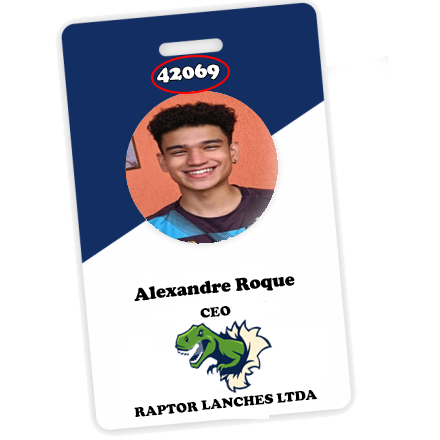
<style>
.page{position:relative;width:440px;height:440px;background:#ffffff}
.page>*{position:absolute;margin:0}
.t1{font:21px "CooperBlack";color:#ffffff}
.t2{font:14px "CooperBlack";color:#000000}
</style>
<div class="page">
<p class="t1" style="left:157px;top:64px;width:63px;height:19px;rotate:-5deg">42069</p>
<p class="t2" style="left:200px;top:306px;width:31px;height:12px;rotate:-5deg">CEO</p>
<p class="t2" style="left:134px;top:390px;width:184px;height:27px;rotate:-6deg">RAPTOR LANCHES LTDA</p>
</div>
